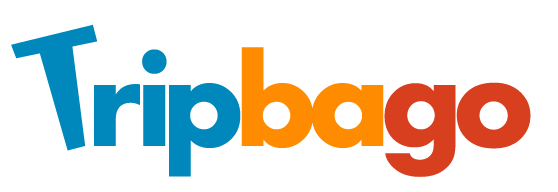
<style>
.page{position:relative;width:558px;height:192px;background:#ffffff}
.page>*{position:absolute;margin:0}
.t1{font:134.6px "Aharoni-Bold";letter-spacing:-0.08em;color:#0088bc}
.t2{font:161.6px "WhimsyTT";letter-spacing:-0.09em;color:#0088bc}
.t3{font:134.6px "Aharoni-Bold";letter-spacing:-0.09em;color:#0088bc}
.t4{font:134.6px "Aharoni-Bold";letter-spacing:-0.08em;color:#ff8b00}
.t5{font:134.6px "Aharoni-Bold";letter-spacing:-0.08em;color:#d83f1f}
</style>
<div class="page">
<p class="t1" style="left:11px;top:24px;width:520px;height:153px"><span class="t2">t</span><span class="t3">r </span>ip<span class="t4">ba</span><span class="t5">go</span></p>
</div>
